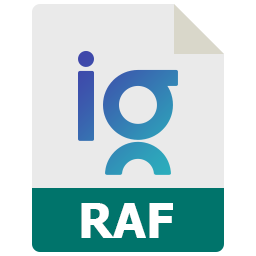
<style>
.page{position:relative;width:256px;height:256px;background:#eaeaea}
.page>*{position:absolute;margin:0}
.t1{font:48px "Tahoma-Bold";color:#ffffff}
</style>
<div class="page">
<p class="t1" style="left:81px;top:203px;width:92px;height:35px">RAF</p>
</div>
